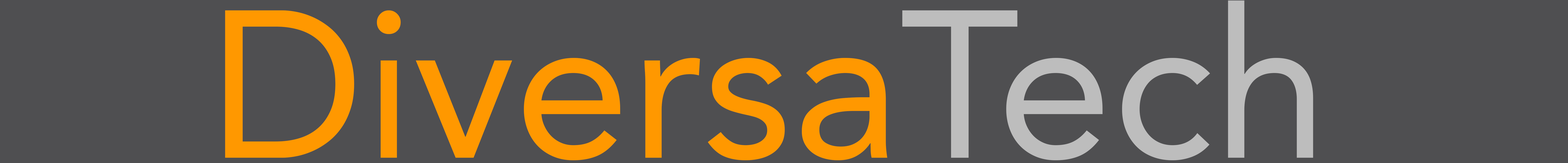
<style>
.page{position:relative;width:1568px;height:163px;background:#4f4f51}
.page>*{position:absolute;margin:0}
.t1{font:208.2px "Avenir-Roman";color:#ff9800}
.t2{font:208.2px "Avenir-Roman";color:#bdbdbd}
</style>
<div class="page">
<p class="t1" style="left:225px;top:0px;width:1088px;height:161px">Diversa<span class="t2">Tech</span></p>
</div>
